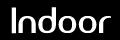
<style>
.page{position:relative;width:120px;height:40px;background:#000000}
.page>*{position:absolute;margin:0}
.t1{font:34px "AmerikaSans";color:#ffffff}
</style>
<div class="page">
<p class="t1" style="left:11px;top:7px;width:100px;height:27px">Indoor</p>
</div>
